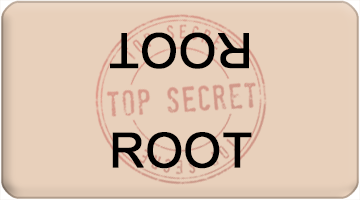
<style>
.page{position:relative;width:360px;height:200px;background:#e8d0bb}
.page>*{position:absolute;margin:0}
.t1{font:48px "ArialMT";color:#000000;font-weight:bold}
</style>
<div class="page">
<p class="t1" style="left:110px;top:32px;width:139px;height:37px;rotate:180deg">ROOT</p>
<p class="t1" style="left:112px;top:132px;width:140px;height:37px">ROOT</p>
</div>
